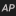
<style>
.page{position:relative;width:16px;height:16px;background:#1d1d1d}
.page>*{position:absolute;margin:0}
.t1{font:10px "Roboto-MediumItalic";color:#c6bfbf}
</style>
<div class="page">
<p class="t1" style="left:1px;top:4px;width:14px;height:8px">AP</p>
</div>
